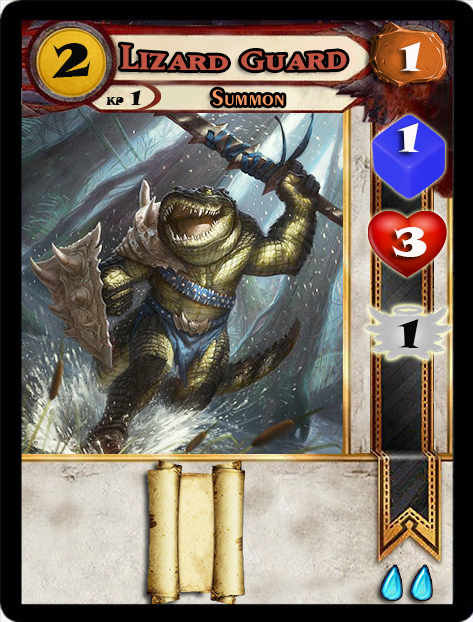
<style>
.page{position:relative;width:473px;height:622px}
.page>*{position:absolute;margin:0}
.t1{font:46.6px "SnapITC-Regular";color:#090909;scale:1.05 1}
.t2{font:40px "SnapITC-Regular";color:#fef9f9;scale:1.05 1}
.t3{font:22.7px "Exotic350BT-DemiBold";color:#f89c64;scale:1.06 1}
.t4{font:20.5px "SnapITC-Regular";color:#090909}
.t5{font:40px "SnapITC-Regular";color:#090909;scale:1.05 1}
</style>
<div class="page">
<p class="t1" style="left:51px;top:43px;width:40px;height:35px">2</p>
<p class="t2" style="left:399px;top:42px;width:22px;height:29px">1</p>
<p class="t3" style="left:212px;top:89px;width:72px;height:17px">Summon</p>
<p class="t4" style="left:130px;top:90px;width:11px;height:15px">1</p>
<p class="t2" style="left:397px;top:123px;width:22px;height:29px">1</p>
<p class="t2" style="left:392px;top:227px;width:35px;height:30px">3</p>
<p class="t5" style="left:397px;top:319px;width:22px;height:29px">1</p>
</div>
